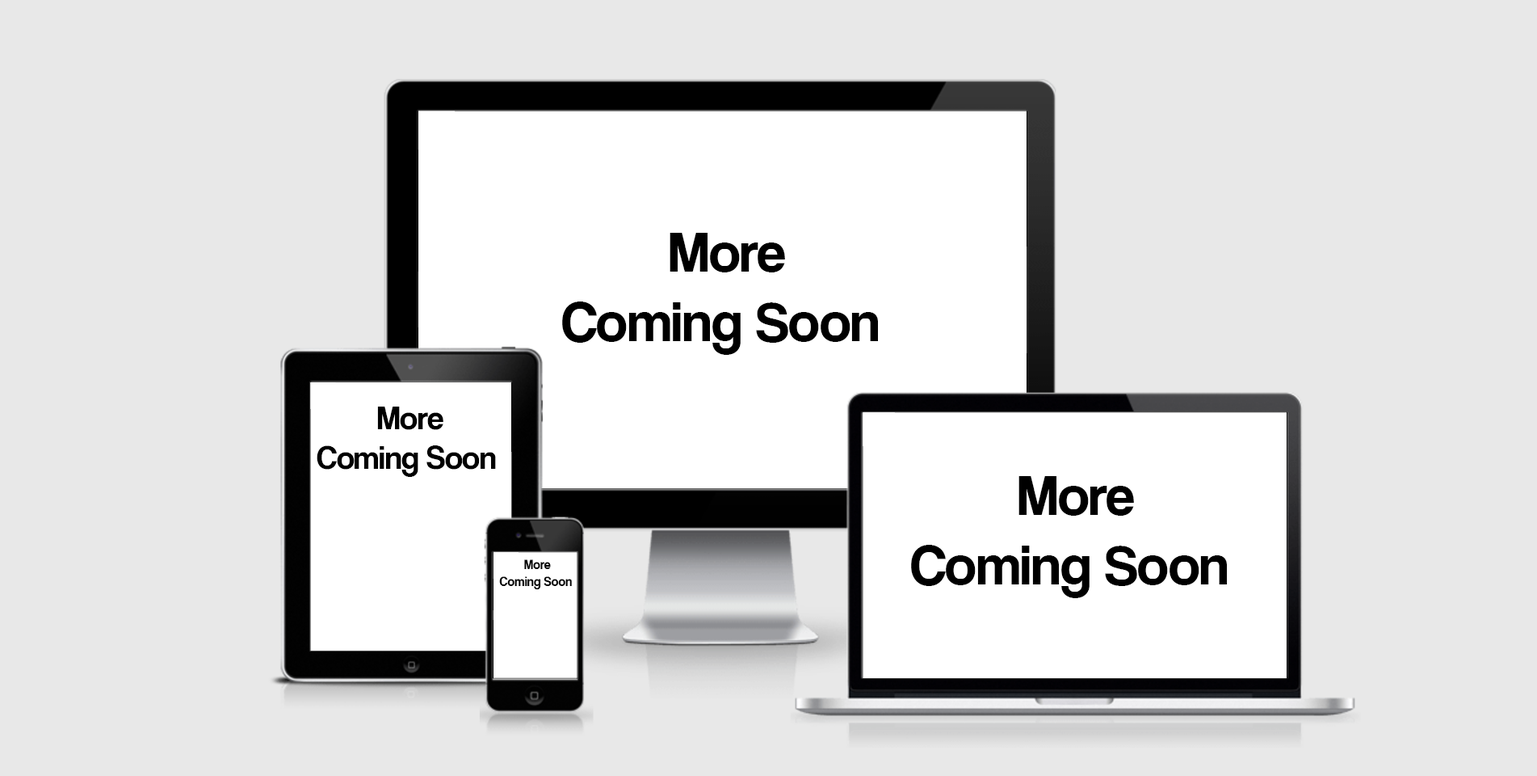
<style>
.page{position:relative;width:1537px;height:776px;background:#e8e8e8}
.page>*{position:absolute;margin:0}
.t1{font:58.2px "CoolveticaRg-Regular";color:#000000}
.t2{font:32.8px "CoolveticaRg-Regular";color:#000000}
.t3{font:13.6px "CoolveticaRg-Regular";color:#000000}
</style>
<div class="page">
<p class="t1" style="left:562px;top:233px;width:316px;height:122px;text-align:center">More <br>Coming Soon</p>
<p class="t2" style="left:317px;top:406px;width:179px;height:71px;text-align:center">More <br>Coming Soon</p>
<p class="t1" style="left:911px;top:476px;width:316px;height:122px;text-align:center">More <br>Coming Soon</p>
<p class="t3" style="left:499px;top:559px;width:73px;height:31px;text-align:center">More <br>Coming Soon</p>
</div>
